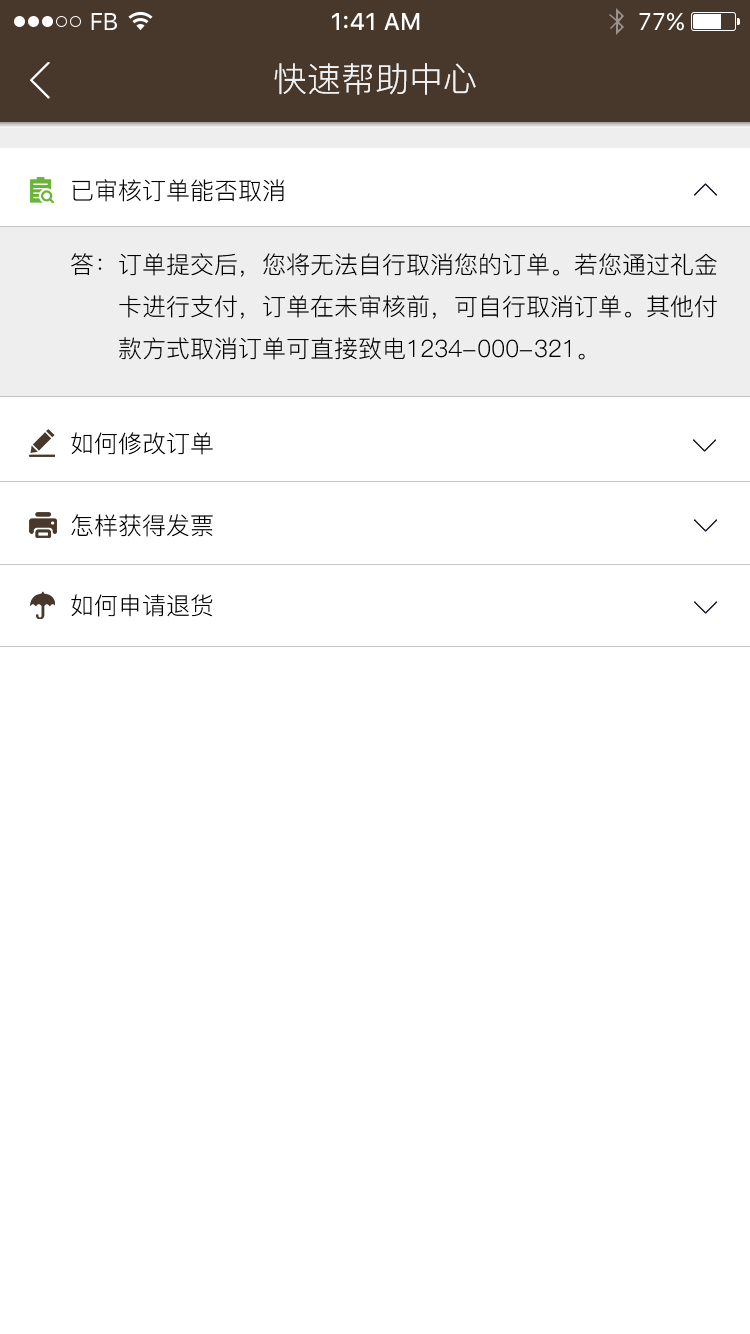
<style>
.page{position:relative;width:750px;height:1334px;background:#ffffff}
.page>*{position:absolute;margin:0}
.t1{font:24px "SFUIText-Regular";letter-spacing:-0.025em;color:#ffffff}
.t2{font:24px "SFUIText-Medium";color:#ffffff}
.t3{font:24px "SFUIText-Regular";color:#ffffff}
.t4{font:34px "PingFang-SC-Regular";color:#f1f1f1}
.t5{font:24px "PingFang-SC-Regular";color:#000000}
</style>
<div class="page">
<p class="t1" style="left:91px;top:13px;width:26px;height:17px">FB</p>
<p class="t2" style="left:332px;top:13px;width:88px;height:17px">1:41 AM</p>
<p class="t3" style="left:639px;top:12px;width:45px;height:19px">77%</p>
<p class="t4" style="left:274px;top:63px;width:202px;height:32px">快速帮助中心</p>
<p class="t5" style="left:72px;top:179px;width:212px;height:23px">已审核订单能否取消</p>
<p class="t5" style="left:71px;top:253px;width:646px;height:107px">答：订单提交后，您将无法自行取消您的订单。若您通过礼金<br>      卡进行支付，订单在未审核前，可自行取消订单。其他付<br>      款方式取消订单可直接致电1234-000-321。</p>
<p class="t5" style="left:71px;top:432px;width:142px;height:23px">如何修改订单</p>
<p class="t5" style="left:71px;top:514px;width:142px;height:23px">怎样获得发票</p>
<p class="t5" style="left:71px;top:594px;width:142px;height:23px">如何申请退货</p>
</div>
